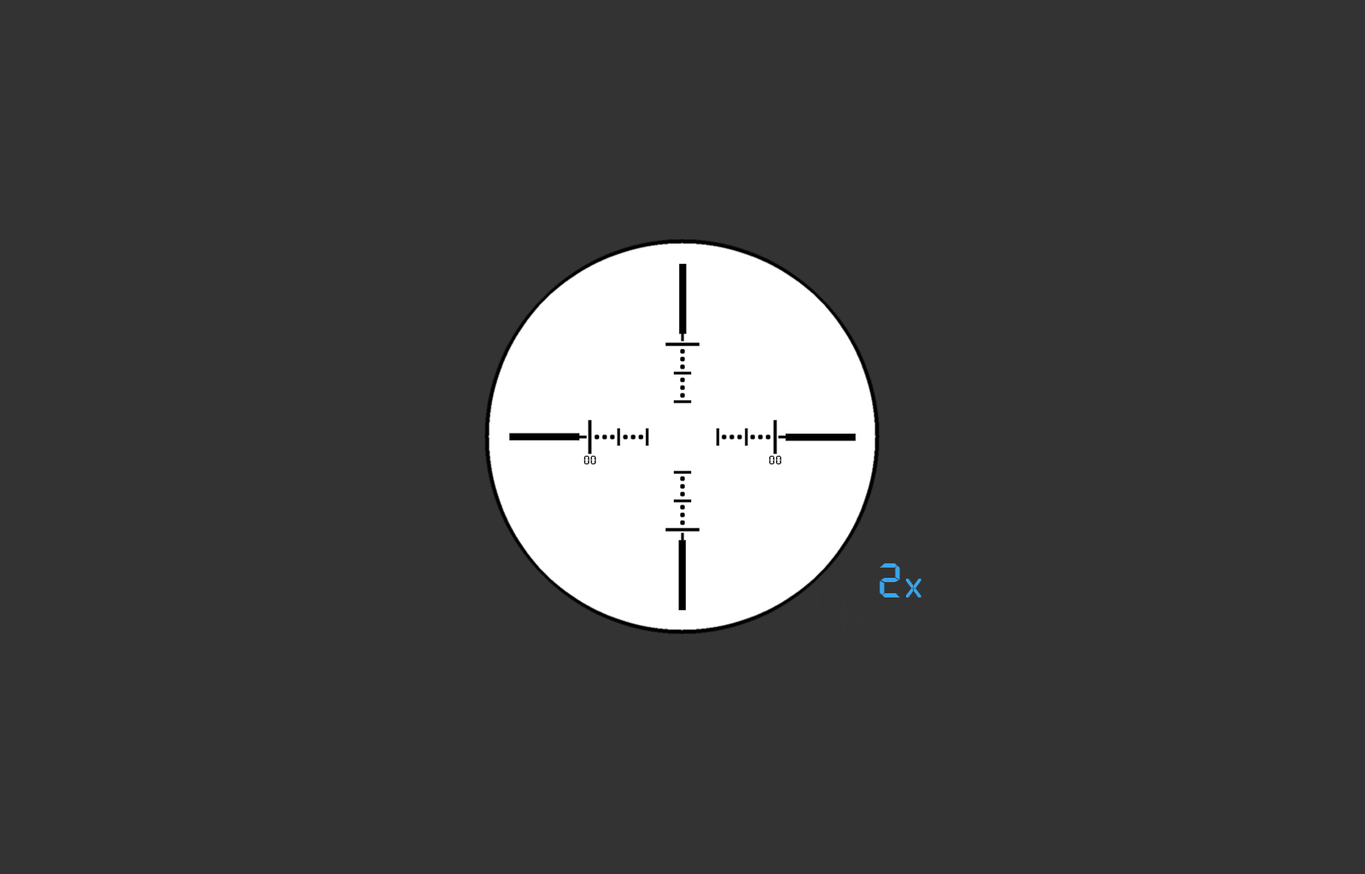
<style>
.page{position:relative;width:1365px;height:874px;background:#333333}
.page>*{position:absolute;margin:0}
.t1{font:11.7px "Quartz-Regular";letter-spacing:0.08em;color:#000000}
.t2{font:48px "Quartz-Regular";letter-spacing:0.08em;color:#39a5ed}
.t3{font:25.8px "Quartz-Regular";letter-spacing:0.08em;color:#39a5ed;scale:1.47 1}
</style>
<div class="page">
<p class="t1" style="left:584px;top:456px;width:12px;height:8px">00</p>
<p class="t1" style="left:769px;top:456px;width:12px;height:8px">00</p>
<p class="t2" style="left:880px;top:563px;width:20px;height:34px">2</p>
<p class="t3" style="left:906px;top:578px;width:15px;height:19px">x</p>
</div>
